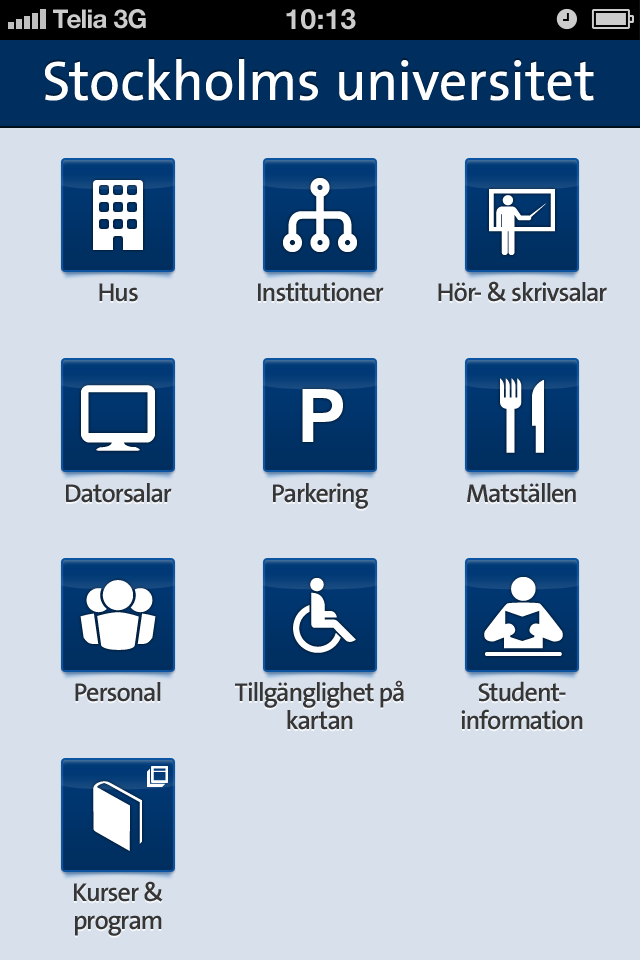
<style>
.page{position:relative;width:640px;height:960px;background:#d7e0eb}
.page>*{position:absolute;margin:0}
.t1{font:26px "HelveticaNeue-Bold";color:#cccccc}
.t2{font:26px "HelveticaNeue-Bold";color:#cccccc;text-transform:uppercase}
.t3{font:28px "HelveticaNeue-Bold";color:#cccccc;text-transform:uppercase}
.t4{font:56px "TheSansB-W5Plain";letter-spacing:0.015em;color:#ffffff}
.t5{font:26px "TheSansB-W6SemiBold";letter-spacing:-0.03em;color:#363636}
.t6{font:74px "Arial-BoldMT";color:#ffffff}
.t7{font:26px/28px "TheSansB-W6SemiBold";letter-spacing:-0.03em;color:#363636}
</style>
<div class="page">
<p class="t1" style="left:53px;top:9px;width:54px;height:20px">Telia</p>
<p class="t2" style="left:114px;top:9px;width:32px;height:20px">3G</p>
<p class="t3" style="left:286px;top:9px;width:70px;height:21px">10:13</p>
<p class="t4" style="left:45px;top:59px;width:549px;height:42px">Stockholms universitet</p>
<p class="t5" style="left:438px;top:281px;width:169px;height:21px">Hör- &amp; skrivsalar</p>
<p class="t5" style="left:99px;top:283px;width:39px;height:19px">Hus</p>
<p class="t5" style="left:258px;top:282px;width:126px;height:20px">Institutioner</p>
<p class="t6" style="left:302px;top:389px;width:41px;height:53px">P</p>
<p class="t5" style="left:66px;top:483px;width:106px;height:20px">Datorsalar</p>
<p class="t5" style="left:273px;top:483px;width:95px;height:26px">Parkering</p>
<p class="t5" style="left:467px;top:483px;width:109px;height:20px">Matställen</p>
<p class="t5" style="left:75px;top:682px;width:86px;height:20px">Personal</p>
<p class="t7" style="left:235px;top:680px;width:169px;height:50px;text-align:center">Tillgänglighet på kartan</p>
<p class="t7" style="left:461px;top:681px;width:122px;height:49px;text-align:center">Student-<br>information</p>
<p class="t7" style="left:74px;top:881px;width:89px;height:55px;text-align:center">Kurser &amp; program</p>
</div>
